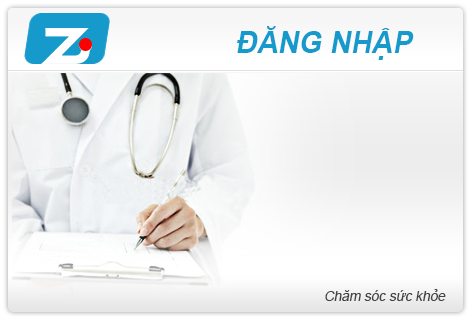
<style>
.page{position:relative;width:471px;height:320px}
.page>*{position:absolute;margin:0}
.t1{font:30px "Arial-BoldMT";color:#159acb;text-transform:uppercase;font-style:italic;scale:0.97 1}
.t2{font:14px "ArialMT";color:#444444;font-style:italic;scale:0.97 1}
</style>
<div class="page">
<p class="t1" style="left:237px;top:26px;width:177px;height:34px">Đăng nhập</p>
<p class="t2" style="left:325px;top:289px;width:121px;height:12px">Chăm sóc sức khỏe</p>
</div>
